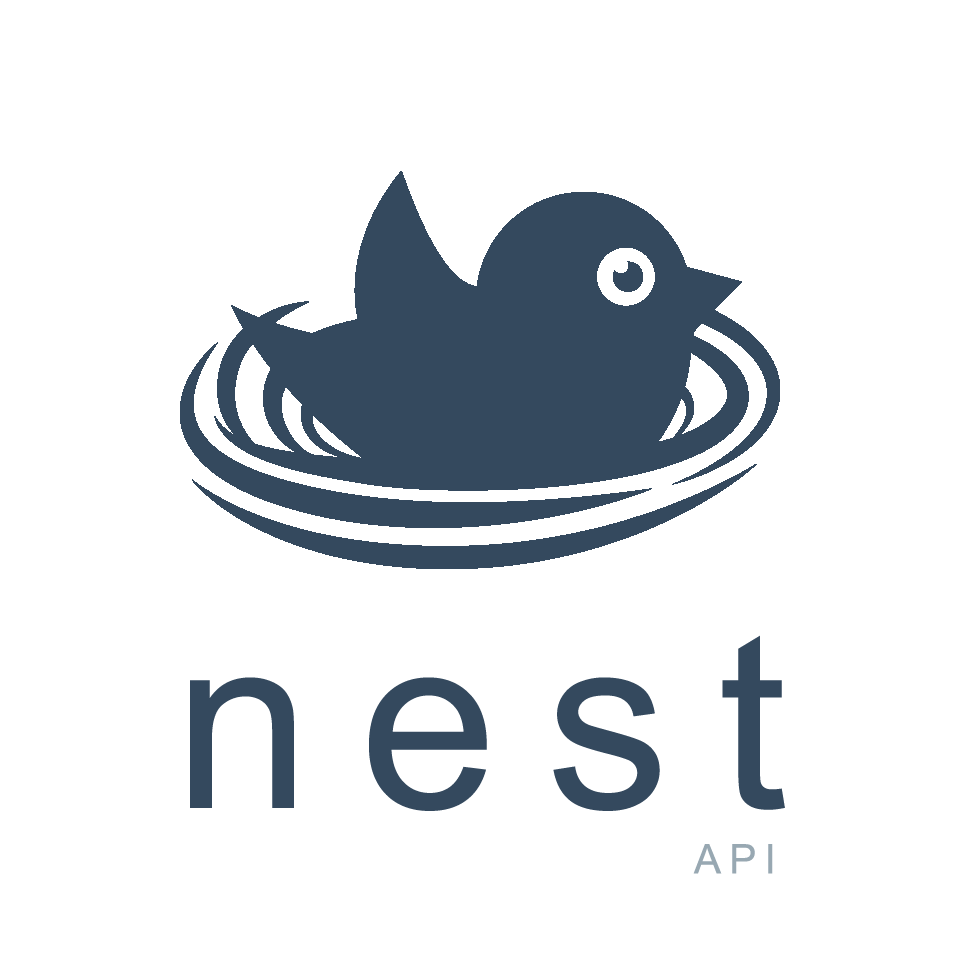
<style>
.page{position:relative;width:960px;height:960px;background:#ffffff}
.page>*{position:absolute;margin:0}
.t1{font:246px "ArialMT";letter-spacing:0.2em;color:#34495e}
.t2{font:40.7px "ArialMT";letter-spacing:0.2em;color:#98a8b2}
</style>
<div class="page">
<p class="t1" style="left:190px;top:635px;width:595px;height:176px">nest</p>
<p class="t2" style="left:693px;top:844px;width:80px;height:30px">API</p>
</div>
